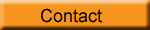
<style>
.page{position:relative;width:150px;height:30px;background:#f7941d}
.page>*{position:absolute;margin:0}
.t1{font:18px "ArialMT";color:#000000}
</style>
<div class="page">
<p class="t1" style="left:41px;top:8px;width:61px;height:15px">Contact</p>
</div>
